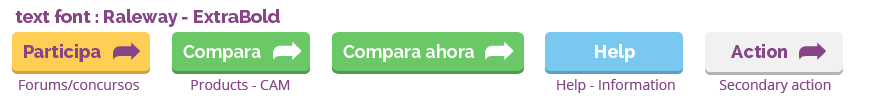
<style>
.page{position:relative;width:870px;height:100px;background:#ffffff}
.page>*{position:absolute;margin:0}
.t1{font:18px "Raleway-ExtraBold";color:#864587}
.t2{font:18px "Raleway-Bold";color:#ffffff}
.t3{font:18px "Raleway-ExtraBold";color:#ffffff}
.t4{font:14px "OpenSans";color:#864587}
</style>
<div class="page">
<p class="t1" style="left:15px;top:9px;width:265px;height:18px">text font : Raleway - ExtraBold</p>
<p class="t1" style="left:24px;top:44px;width:77px;height:18px">Participa</p>
<p class="t2" style="left:183px;top:45px;width:78px;height:17px">Compara</p>
<p class="t2" style="left:343px;top:44px;width:131px;height:18px">Compara ahora</p>
<p class="t3" style="left:595px;top:44px;width:40px;height:18px">Help</p>
<p class="t1" style="left:731px;top:44px;width:56px;height:14px">Action</p>
<p class="t4" style="left:19px;top:79px;width:812px;height:14px">Forums/concursos              Products - CAM                                                                         Help - Information            Secondary action</p>
</div>
